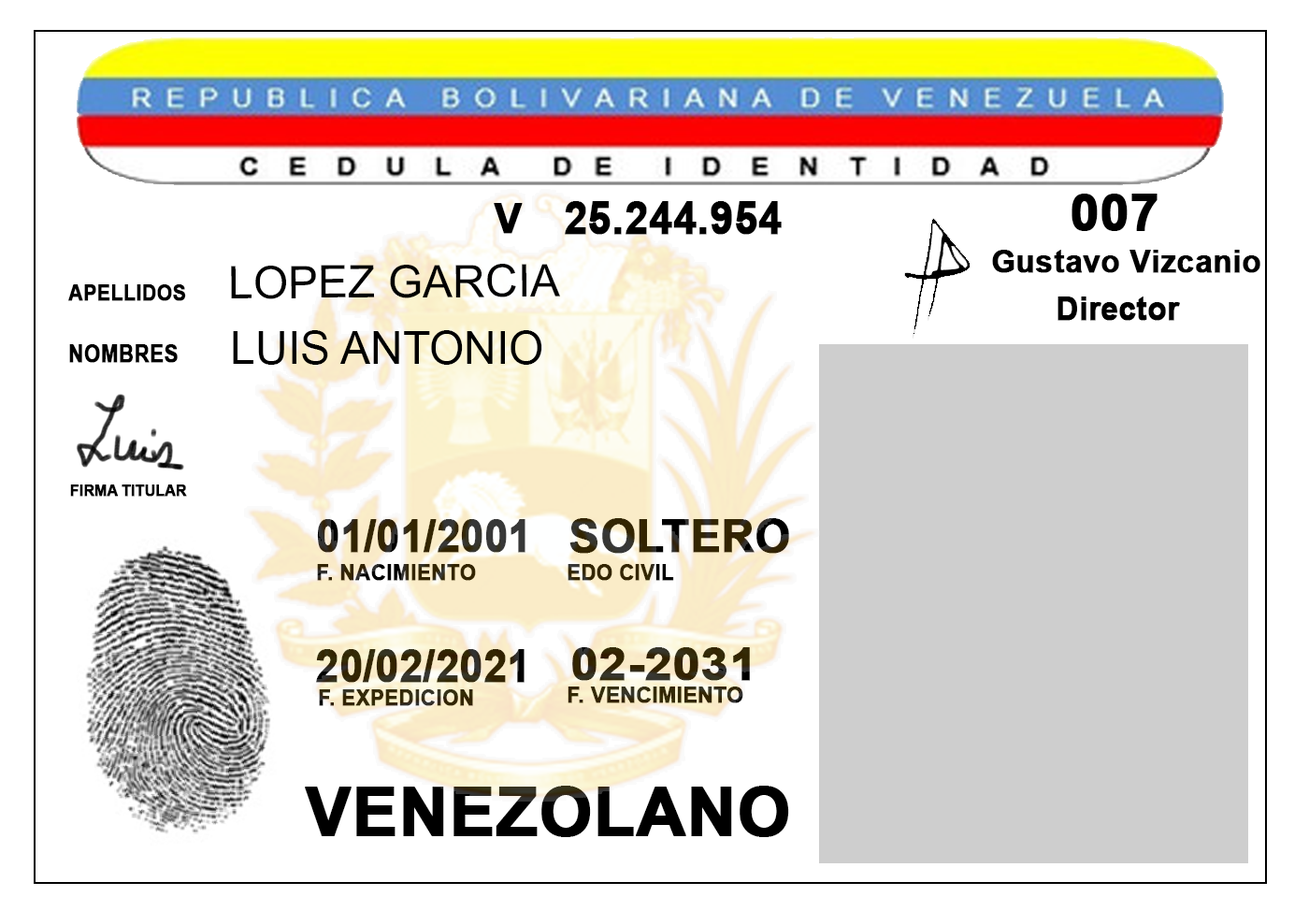
<style>
.page{position:relative;width:1309px;height:911px;background:#ffffff}
.page>*{position:absolute;margin:0}
.t1{font:50.2px "Arial-BoldMT";color:#000000;font-weight:bold}
.t2{font:41.5px "Arial-BoldMT";color:#000000;font-weight:bold}
.t3{font:44.9px "Arial-BoldMT";color:#000000;font-weight:bold;scale:0.92 1}
.t4{font:30.8px "Arial-BoldMT";color:#000000;font-weight:bold}
.t5{font:44.9px "ArialMT";color:#000000}
.t6{font:21.8px "Arial-BoldMT";color:#000000;font-weight:bold;scale:0.91 1}
.t7{font:31.8px "Arial-BoldMT";color:#000000;font-weight:bold;scale:0.96 1}
.t8{font:24.1px "Arial-BoldMT";color:#000000;font-weight:bold;scale:0.86 1}
.t9{font:16.1px "Arial-BoldMT";color:#000000;font-weight:bold;scale:0.9 1}
.t10{font:44.9px "Arial-BoldMT";font-weight:bold;scale:0.91 1}
.t11{font:44.9px "Arial-BoldMT";font-weight:bold}
.t12{font:22.4px "Arial-BoldMT";font-weight:bold;scale:0.92 1}
.t13{font:22.4px "Arial-BoldMT";font-weight:bold;scale:0.91 1}
.t14{font:44.9px "Arial-BoldMT";color:#332808;font-weight:bold;scale:1.08 1}
.t15{font:22.4px "Arial-BoldMT";color:#332a08;font-weight:bold;scale:0.92 1}
.t16{font:22.4px "Arial-BoldMT";color:#332a07;font-weight:bold;scale:0.94 1}
.t17{font:67.3px "Arial-BoldMT";color:#000000;font-weight:bold}
</style>
<div class="page">
<p class="t1" style="left:1072px;top:194px;width:86px;height:37px">007</p>
<p class="t2" style="left:494px;top:203px;width:29px;height:31px">V</p>
<p class="t3" style="left:565px;top:201px;width:217px;height:34px">25.244.954</p>
<p class="t4" style="left:992px;top:250px;width:269px;height:23px">Gustavo Vizcanio</p>
<p class="t5" style="left:231px;top:264px;width:329px;height:35px">LOPEZ GARCIA</p>
<p class="t6" style="left:68px;top:284px;width:118px;height:17px">APELLIDOS</p>
<p class="t7" style="left:1058px;top:296px;width:122px;height:25px">Director</p>
<p class="t5" style="left:233px;top:330px;width:309px;height:35px">LUIS ANTONIO</p>
<p class="t8" style="left:69px;top:344px;width:109px;height:19px">NOMBRES</p>
<p class="t9" style="left:70px;top:484px;width:117px;height:13px">FIRMA TITULAR</p>
<p class="t10" style="left:317px;top:519px;width:209px;height:34px">01/01/2001</p>
<p class="t11" style="left:569px;top:518px;width:220px;height:36px">SOLTERO</p>
<p class="t12" style="left:317px;top:564px;width:159px;height:17px">F. NACIMIENTO</p>
<p class="t13" style="left:568px;top:564px;width:106px;height:17px">EDO CIVIL</p>
<p class="t10" style="left:316px;top:649px;width:209px;height:34px">20/02/2021</p>
<p class="t14" style="left:572px;top:647px;width:178px;height:34px">02-2031</p>
<p class="t15" style="left:319px;top:689px;width:154px;height:17px">F. EXPEDICION</p>
<p class="t16" style="left:568px;top:686px;width:175px;height:17px">F. VENCIMIENTO</p>
<p class="t17" style="left:305px;top:786px;width:484px;height:51px">VENEZOLANO</p>
</div>
